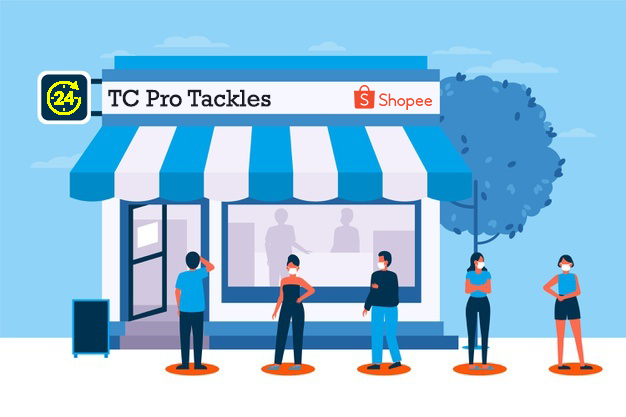
<style>
.page{position:relative;width:626px;height:417px;background:#8fd3f8}
.page>*{position:absolute;margin:0}
.t1{font:24px "Rockwell";color:#191c22}
</style>
<div class="page">
<p class="t1" style="left:108px;top:89px;width:163px;height:18px">TC Pro Tackles</p>
</div>
